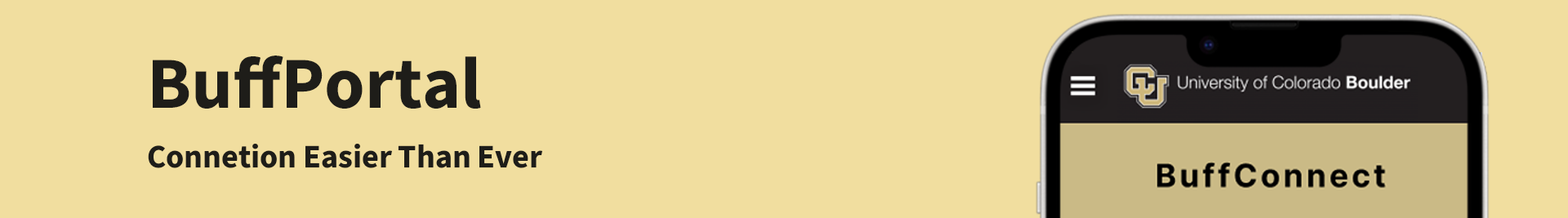
<style>
.page{position:relative;width:1568px;height:218px;background:#f1de9f}
.page>*{position:absolute;margin:0}
.t1{font:32.7px/93.6px "SourceSansRoman-Bold";color:#1e1d19}
.t2{font:73.3px/93.6px "SourceSansRoman-Bold";color:#1e1d19}
</style>
<div class="page">
<p class="t1" style="left:148px;top:56px;width:394px;height:112px"><span class="t2">BuffPortal<br></span>Connetion Easier Than Ever</p>
</div>
